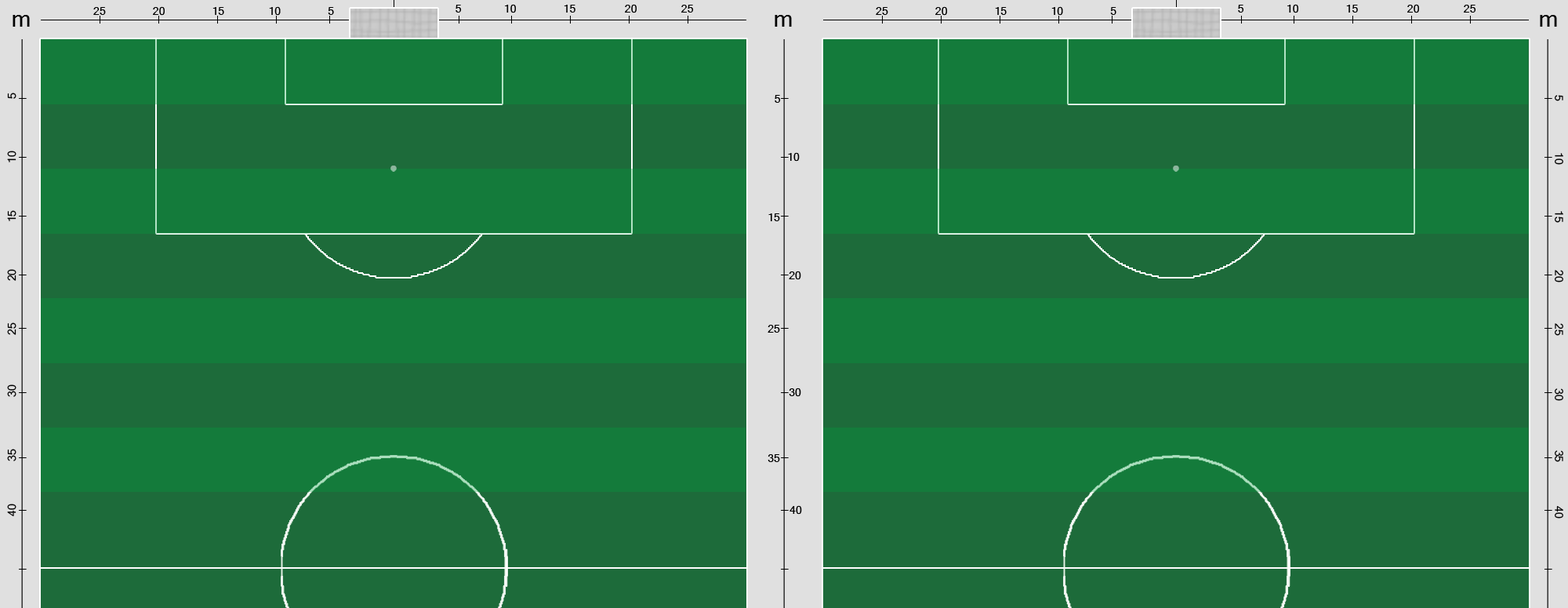
<style>
.page{position:relative;width:1568px;height:608px;background:#1d6b3a}
.page>*{position:absolute;margin:0}
.t1{font:11px "MicrosoftSansSerif";color:#000000}
.t2{font:23.5px "MicrosoftSansSerif";color:#000000}
</style>
<div class="page">
<p class="t1" style="left:456px;top:4px;width:238px;height:9px">5         10          15   20    25</p>
<p class="t1" style="left:1238px;top:4px;width:238px;height:9px">5         10          15   20    25</p>
<p class="t2" style="left:13px;top:15px;width:17px;height:12px">m</p>
<p class="t1" style="left:93px;top:6px;width:241px;height:10px">25    20    15    10      5</p>
<p class="t2" style="left:775px;top:15px;width:17px;height:12px">m</p>
<p class="t1" style="left:876px;top:6px;width:240px;height:10px">25    20    15    10      5</p>
<p class="t2" style="left:1540px;top:15px;width:17px;height:12px">m</p>
<p class="t1" style="left:7px;top:93px;width:9px;height:423px;rotate:-90deg">40           35    30        25      20                15                10                  5</p>
<p class="t1" style="left:775px;top:95px;width:6px;height:8px">5</p>
<p class="t1" style="left:1555px;top:95px;width:8px;height:423px;rotate:90deg">5             10    15       20     25                  30                 35               40</p>
<p class="t1" style="left:788px;top:152px;width:12px;height:10px">10</p>
<p class="t1" style="left:768px;top:213px;width:12px;height:8px">15</p>
<p class="t1" style="left:789px;top:270px;width:12px;height:10px">20</p>
<p class="t1" style="left:768px;top:325px;width:12px;height:7px">25</p>
<p class="t1" style="left:789px;top:387px;width:12px;height:10px">30</p>
<p class="t1" style="left:768px;top:454px;width:12px;height:8px">35</p>
<p class="t1" style="left:789px;top:505px;width:13px;height:9px">40</p>
</div>
